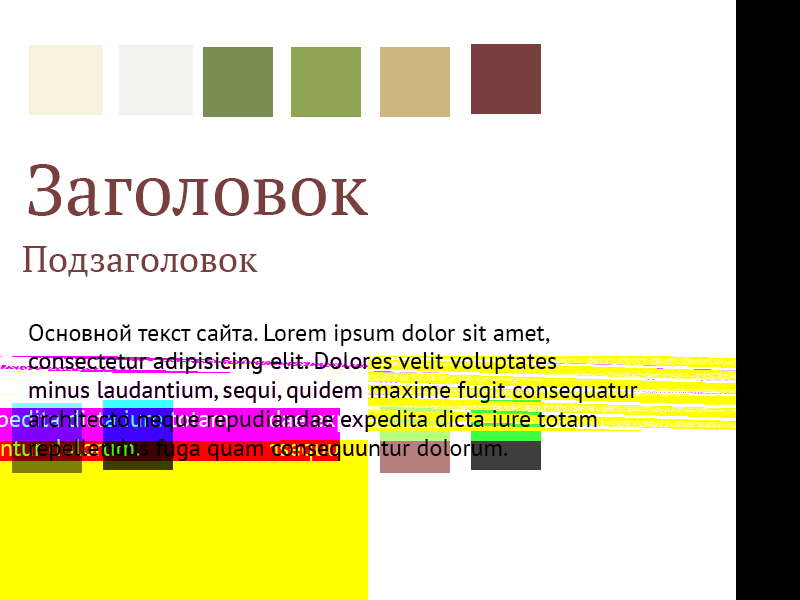
<style>
.page{position:relative;width:800px;height:600px;background:#ffffff}
.page>*{position:absolute;margin:0}
.t1{font:72px "PTSerif-Regular";color:#793f3e}
.t2{font:36px "PTSerif-Regular";color:#793f3e}
.t3{font:24px "PTSans-Regular";color:#000000}
</style>
<div class="page">
<p class="t1" style="left:28px;top:164px;width:340px;height:52px">Заголовок</p>
<p class="t2" style="left:23px;top:246px;width:235px;height:31px">Подзаголовок</p>
<p class="t3" style="left:28px;top:324px;width:610px;height:137px">Основной текст сайта. Lorem ipsum dolor sit amet, <br>consectetur adipisicing elit. Dolores velit voluptates <br>minus laudantium, sequi, quidem maxime fugit consequatur <br>architecto neque repudiandae expedita dicta iure totam <br>repellendus fuga quam consequuntur dolorum.</p>
</div>
